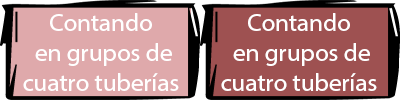
<style>
.page{position:relative;width:400px;height:100px;background:#dfa9ab}
.page>*{position:absolute;margin:0}
.t1{font:25px "MyriadHebrew-Regular";color:#ffffff}
</style>
<div class="page">
<p class="t1" style="left:23px;top:13px;width:156px;height:78px;text-align:center">Contando<br>en grupos de <br>cuatro tuberías</p>
<p class="t1" style="left:221px;top:13px;width:156px;height:78px;text-align:center">Contando<br>en grupos de <br>cuatro tuberías</p>
</div>
